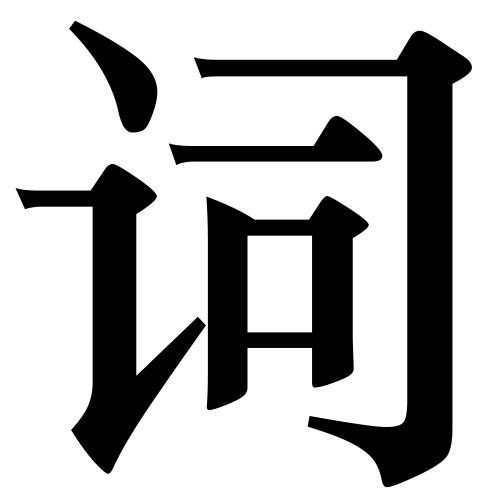
<style>
.page{position:relative;width:500px;height:500px;background:#ffffff}
.page>*{position:absolute;margin:0}
.t1{font:501px "STZhongsong";color:#000000}
</style>
<div class="page">
<p class="t1" style="left:15px;top:20px;width:457px;height:468px">词</p>
</div>
